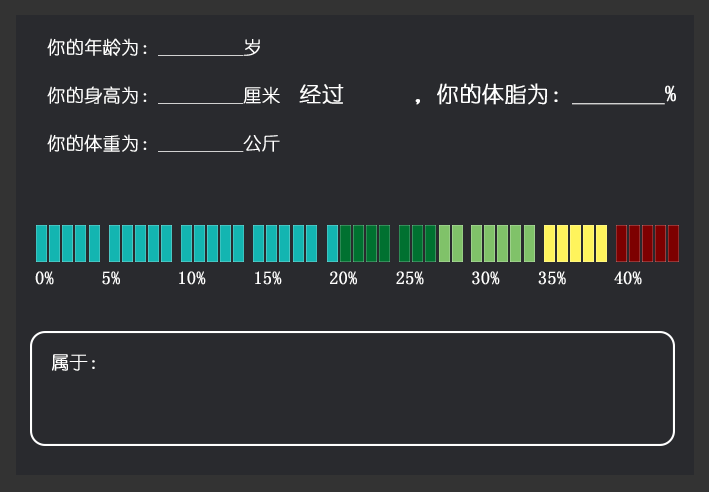
<style>
.page{position:relative;width:709px;height:492px;background:#292a2e}
.page>*{position:absolute;margin:0}
.t1{font:18px/16px "YouYuan";color:#ffffff;font-weight:bold}
.t2{font:22px/16px "YouYuan";color:#ffffff;font-weight:bold}
.t3{font:18px "YouYuan";color:#ffffff;font-weight:bold}
</style>
<div class="page">
<p class="t1" style="left:47px;top:38px;width:629px;height:114px">你的年龄为：_________岁<br><br>                       <br>你的身高为：_________厘米<span class="t2"> 经过      ，你的体脂为：________%<br><br><br></span>你的体重为：_________公斤</p>
<p class="t3" style="left:35px;top:271px;width:607px;height:14px">0%     5%      10%     15%     20%    25%     30%    35%     40%</p>
<p class="t3" style="left:52px;top:354px;width:43px;height:17px">属于：</p>
</div>
